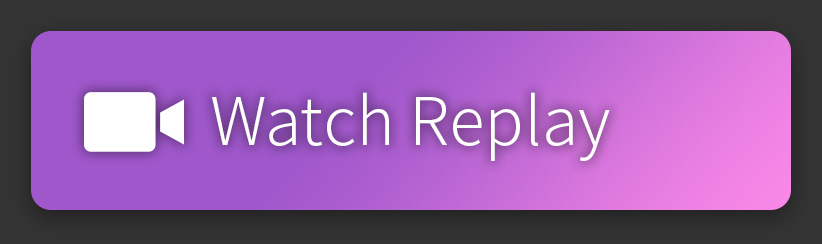
<style>
.page{position:relative;width:822px;height:244px}
.page>*{position:absolute;margin:0}
.t1{font:66px "NotoSansCJKkr-Light";color:#ffffff}
</style>
<div class="page">
<p class="t1" style="left:212px;top:92px;width:398px;height:69px">Watch Replay</p>
</div>
